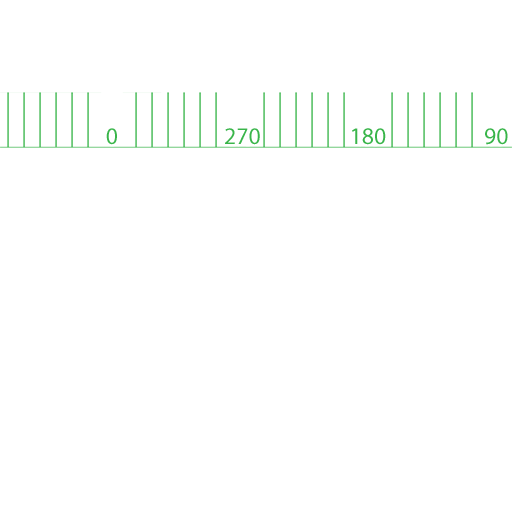
<style>
.page{position:relative;width:512px;height:512px;background:#ffffff}
.page>*{position:absolute;margin:0}
.t1{font:23.9px "MyriadPro-Regular";color:#39b54a}
</style>
<div class="page">
<p class="t1" style="left:106px;top:128px;width:11px;height:17px">0</p>
<p class="t1" style="left:225px;top:128px;width:35px;height:17px">270</p>
<p class="t1" style="left:352px;top:128px;width:34px;height:17px">180</p>
<p class="t1" style="left:485px;top:128px;width:23px;height:17px">90</p>
</div>
